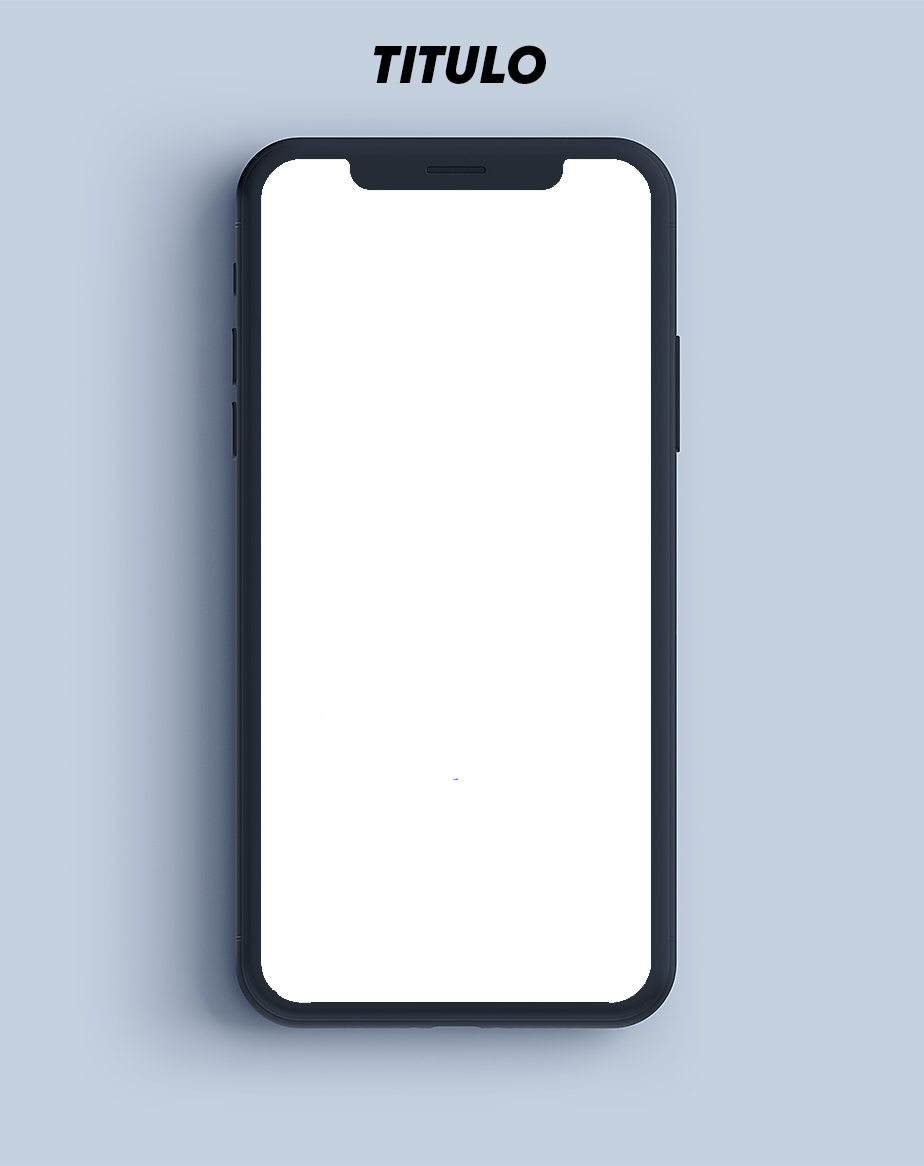
<style>
.page{position:relative;width:924px;height:1166px;background:#c5d1df}
.page>*{position:absolute;margin:0}
.t1{font:47px "LEMONMILK-BoldItalic";color:#000000}
</style>
<div class="page">
<p class="t1" style="left:373px;top:45px;width:173px;height:39px">titulo</p>
</div>
